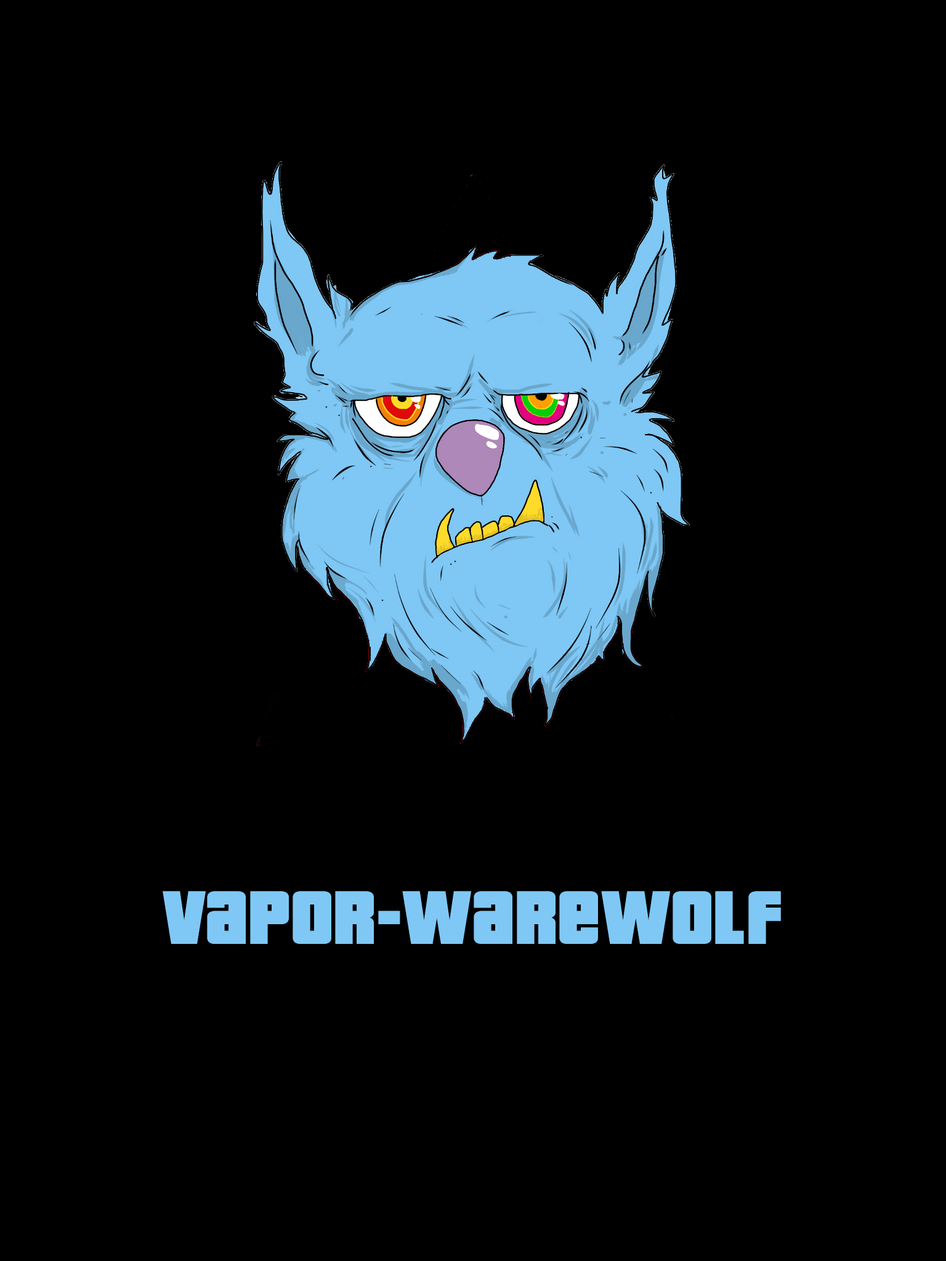
<style>
.page{position:relative;width:946px;height:1261px;background:#000000}
.page>*{position:absolute;margin:0}
.t1{font:103.7px "Pricedown";color:#7fc8f5}
</style>
<div class="page">
<p class="t1" style="left:163px;top:891px;width:618px;height:53px">Vapor-warewolf</p>
</div>
